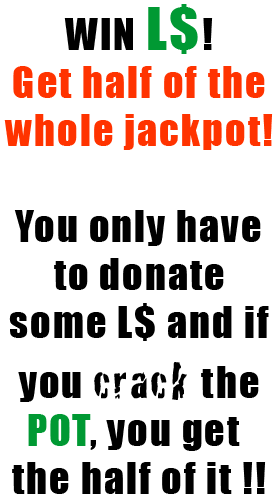
<style>
.page{position:relative;width:280px;height:500px;background:#ffffff}
.page>*{position:absolute;margin:0}
.t1{font:40px "Impact";letter-spacing:0.05em;color:#000000}
.t2{font:55px "Impact";letter-spacing:0.05em;color:#009933}
.t3{font:40px "Impact";letter-spacing:0.05em;color:#ff3300}
.t4{font:50px "Cracked";letter-spacing:0.05em;color:#000000}
.t5{font:40px "Impact";letter-spacing:0.05em;color:#009933}
</style>
<div class="page">
<p class="t1" style="left:4px;top:4px;width:269px;height:490px;text-align:center">WIN <span class="t2">L$</span>!<br><span class="t3">Get half of the<br>whole jackpot!<br></span><br>You only have<br>to donate<br>some L$ and if<br>you <span class="t4">crack </span>the<br><span class="t5">POT</span>, you get <br>the half of it !!</p>
</div>
